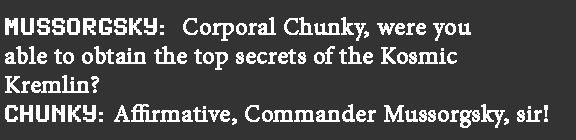
<style>
.page{position:relative;width:576px;height:140px;background:#333333}
.page>*{position:absolute;margin:0}
.t1{font:24px "MinionPro-Regular";color:#ffffff;font-weight:bold}
.t2{font:24px "SynchroLET";color:#ffffff;font-weight:bold}
</style>
<div class="page">
<p class="t1" style="left:5px;top:17px;width:543px;height:111px"><span class="t2">MUSSORGSKY:  </span>Corporal Chunky, were you <br>able to obtain the top secrets of the Kosmic<br>Kremlin?<br><span class="t2">CHUNKY: </span>Affirmative, Commander Mussorgsky, sir!</p>
</div>
